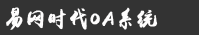
<style>
.page{position:relative;width:199px;height:35px;background:#333333}
.page>*{position:absolute;margin:0}
.t1{font:20.8px "yuweij";color:#fefdfd;font-weight:bold}
</style>
<div class="page">
<p class="t1" style="left:6px;top:7px;width:152px;height:23px">易网时代OA系统</p>
</div>
